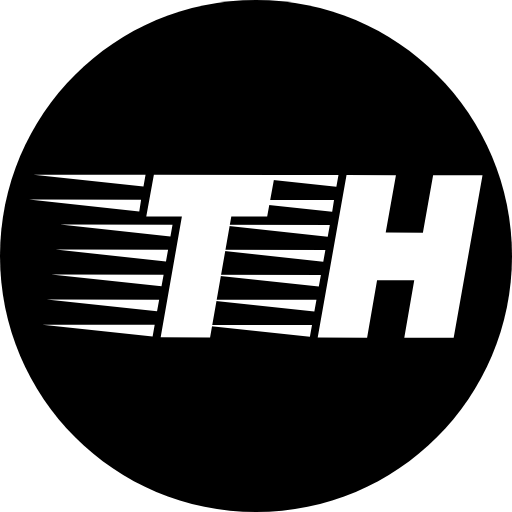
<style>
.page{position:relative;width:512px;height:512px;background:#000000}
.page>*{position:absolute;margin:0}
.t1{font:260px "FasterOne-Regular";color:#ffffff}
</style>
<div class="page">
<p class="t1" style="left:29px;top:174px;width:454px;height:164px">TH</p>
</div>
